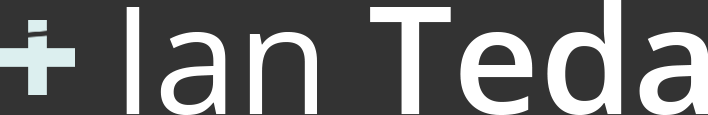
<style>
.page{position:relative;width:708px;height:115px;background:#333333}
.page>*{position:absolute;margin:0}
.t1{font:150px "OpenSans-Semibold";color:#ffffff}
.t2{font:150px "OpenSans";color:#ffffff}
</style>
<div class="page">
<p class="t1" style="left:126px;top:0px;width:583px;height:115px"><span class="t2">Ian </span>Teda</p>
</div>
